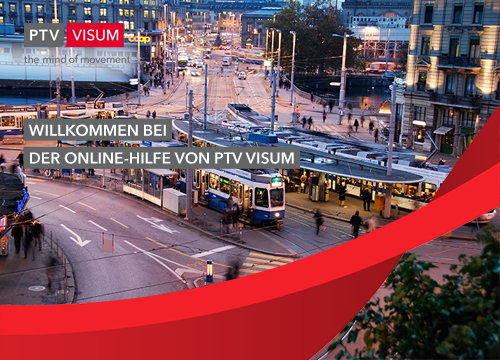
<style>
.page{position:relative;width:500px;height:360px}
.page>*{position:absolute;margin:0}
.t1{font:15.6px "AvenirNextLTPro-Demi";color:#ffffff}
</style>
<div class="page">
<p class="t1" style="left:28px;top:124px;width:138px;height:12px">WILLKOMMEN BEI</p>
<p class="t1" style="left:30px;top:152px;width:213px;height:12px">DER ONLINE-HILFE VON PTV V  V VISUM</p>
<p class="t1" style="left:245px;top:152px;width:49px;height:12px">VISUM</p>
</div>
